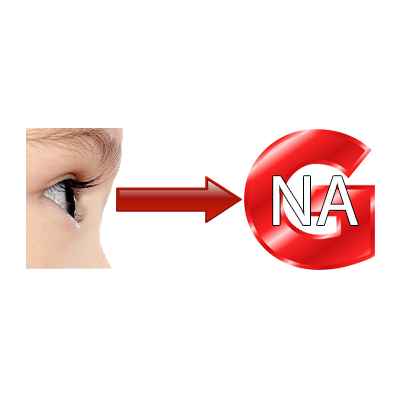
<style>
.page{position:relative;width:400px;height:400px;background:#ffffff}
.page>*{position:absolute;margin:0}
.t1{font:72px "MyriadPro-Regular";color:#fafcfd}
</style>
<div class="page">
<p class="t1" style="left:273px;top:176px;width:85px;height:49px">NA</p>
</div>
